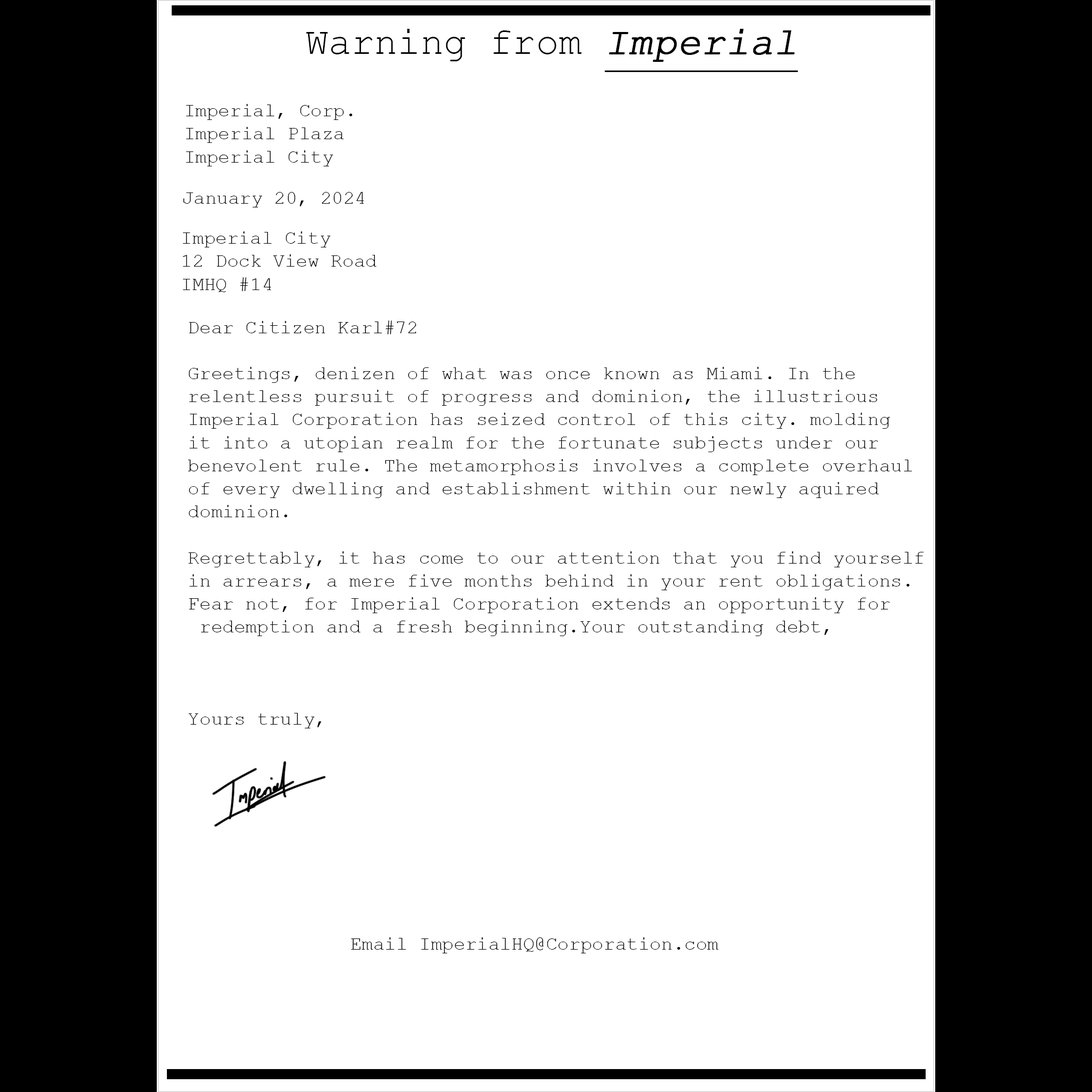
<style>
.page{position:relative;width:1092px;height:1092px;background:#ffffff}
.page>*{position:absolute;margin:0}
.t1{font:38.4px "CourierNewPSMT";color:#000000}
.t2{font:38.4px "CourierNewPSMT";color:#000000;font-weight:bold;font-style:italic;text-decoration:underline}
.t3{font:19.2px "CourierNewPSMT";color:#000000}
</style>
<div class="page">
<p class="t1" style="left:306px;top:29px;width:492px;height:44px">Warning from <span class="t2">Imperial</span></p>
<p class="t3" style="left:186px;top:104px;width:166px;height:62px">Imperial, Corp.<br>Imperial Plaza<br>Imperial City</p>
<p class="t3" style="left:183px;top:192px;width:181px;height:15px">January 20, 2024</p>
<p class="t3" style="left:183px;top:231px;width:193px;height:61px">Imperial City<br>12 Dock View Road<br>IMHQ #14</p>
<p class="t3" style="left:188px;top:320px;width:736px;height:408px">Dear Citizen Karl#72<br><br>Greetings, denizen of what was once known as Miami. In the <br>relentless pursuit of progress and dominion, the illustrious <br>Imperial Corporation has seized control of this city. molding <br>it into a utopian realm for the fortunate subjects under our<br>benevolent rule. The metamorphosis involves a complete overhaul<br>of every dwelling and establishment within our newly aquired<br>dominion.<br><br>Regrettably, it has come to our attention that you find yourself<br>in arrears, a mere five months behind in your rent obligations.<br>Fear not, for Imperial Corporation extends an opportunity for <br> redemption and a fresh beginning.Your outstanding debt,<br><br><br><br>Yours truly,</p>
<p class="t3" style="left:351px;top:937px;width:368px;height:16px">Email ImperialHQ@Corporation.com</p>
</div>
